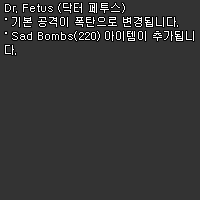
<style>
.page{position:relative;width:200px;height:200px;background:#333333}
.page>*{position:absolute;margin:0}
.t1{font:11px/14px "Dotum";color:#ffffff}
</style>
<div class="page">
<p class="t1" style="left:5px;top:3px;width:189px;height:52px">Dr. Fetus (닥터 페투스)<br>˚ 기본 공격이 폭탄으로 변경됩니다.<br>˚ Sad Bombs(220) 아이템이 추가됩니<br>다.</p>
</div>
